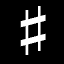
<style>
.page{position:relative;width:64px;height:64px;background:#000000}
.page>*{position:absolute;margin:0}
.t1{font:64px "ArialUnicodeMS";color:#ffffff}
</style>
<div class="page">
<p class="t1" style="left:20px;top:6px;width:26px;height:49px">♯</p>
</div>
